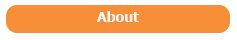
<style>
.page{position:relative;width:237px;height:40px;background:#f78e38}
.page>*{position:absolute;margin:0}
.t1{font:14px "Tahoma-Bold";color:#fbf9f8}
</style>
<div class="page">
<p class="t1" style="left:97px;top:11px;width:42px;height:11px">About</p>
</div>
